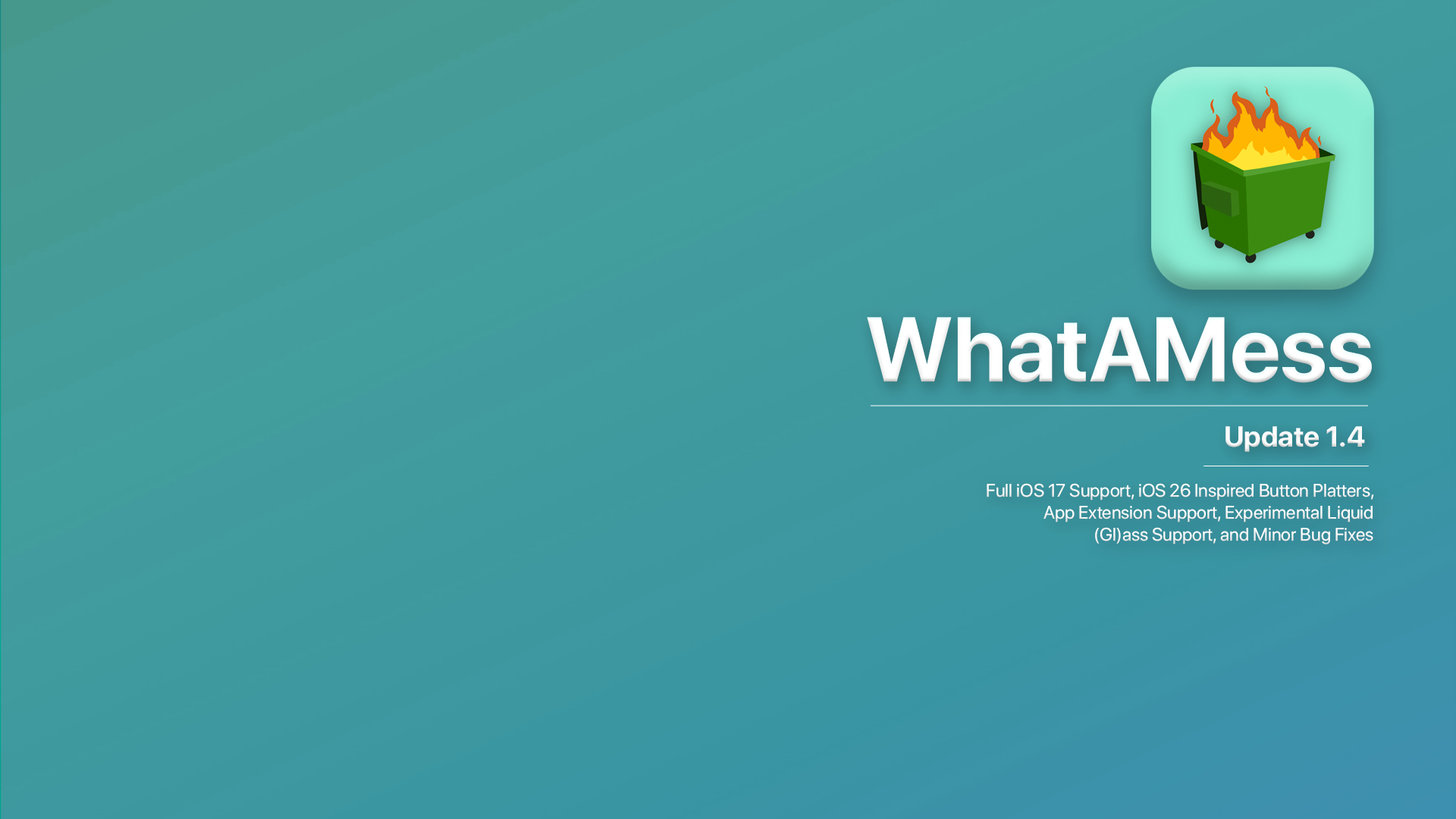
<style>
.page{position:relative;width:1456px;height:819px}
.page>*{position:absolute;margin:0}
.t1{font:91.1px "SFProDisplay-Bold";color:#ffffff}
.t2{font:28.7px "SFProDisplay-Bold";color:#ffffff}
.t3{font:18.2px "SFProDisplay-Regular";color:#ffffff}
</style>
<div class="page">
<p class="t1" style="left:867px;top:317px;width:505px;height:66px">WhatAMess</p>
<p class="t2" style="left:1225px;top:426px;width:140px;height:26px">Update 1.4</p>
<p class="t3" style="left:987px;top:483px;width:387px;height:61px;text-align:right">Full iOS 17 Support, iOS 26 Inspired Button Platters, App Extension Support, Experimental Liquid <br>(Gl)ass Support, and Minor Bug Fixes</p>
</div>
